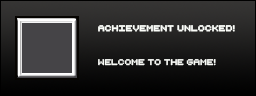
<style>
.page{position:relative;width:256px;height:96px}
.page>*{position:absolute;margin:0}
.t1{font:8px/34.5px "RetroComputer";color:#fbfdf9;font-weight:bold}
.t2{font:8px/34.5px "RetroComputer";color:#fbfdf9}
</style>
<div class="page">
<p class="t1" style="left:98px;top:25px;width:137px;height:41px">Achievement Unlocked!<br><span class="t2">welcome to the game!</span></p>
</div>
